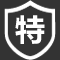
<style>
.page{position:relative;width:60px;height:60px;background:#333333}
.page>*{position:absolute;margin:0}
.t1{font:30px "MicrosoftYaHei-Bold";color:#ffffff}
</style>
<div class="page">
<p class="t1" style="left:15px;top:15px;width:30px;height:29px">特</p>
</div>
